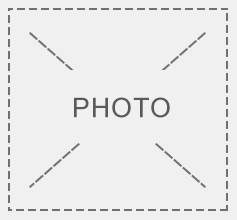
<style>
.page{position:relative;width:237px;height:220px;background:#f0f0f0}
.page>*{position:absolute;margin:0}
.t1{font:27px "ArialMT";color:#5a5a5a;text-transform:uppercase}
</style>
<div class="page">
<p class="t1" style="left:74px;top:97px;width:96px;height:21px">Photo</p>
</div>
